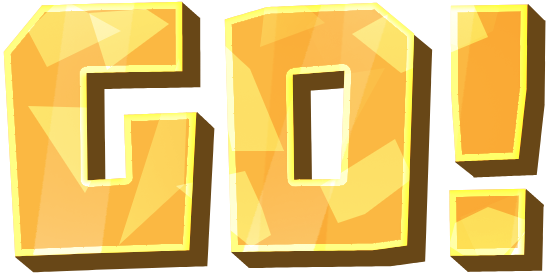
<style>
.page{position:relative;width:547px;height:275px;background:#ffffff}
.page>*{position:absolute;margin:0}
.t1{font:399.6px "Troika"}
</style>
<div class="page">
<p class="t1" style="left:3px;top:1px;width:525px;height:256px">G0!</p>
</div>
